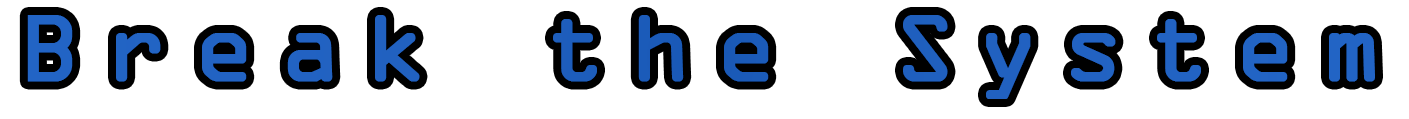
<style>
.page{position:relative;width:1409px;height:119px;background:#ffffff}
.page>*{position:absolute;margin:0}
.t1{font:100px "OCRAExtended";letter-spacing:0.26em;color:#195ec4;font-weight:bold}
.t2{font:100px "OCRAExtended";letter-spacing:0.26em;color:#2262c2;font-weight:bold}
</style>
<div class="page">
<p class="t1" style="left:27px;top:15px;width:1348px;height:84px">Break the System</p>
<p class="t2" style="left:27px;top:15px;width:1348px;height:84px">Break the System</p>
<p class="t2" style="left:27px;top:15px;width:1348px;height:84px">Break the System</p>
<p class="t2" style="left:27px;top:16px;width:1348px;height:84px">Break the System</p>
</div>
